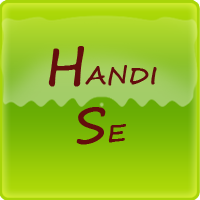
<style>
.page{position:relative;width:200px;height:200px}
.page>*{position:absolute;margin:0}
.t1{font:24px "SegoeScript";color:#640d0d;font-weight:bold}
.t2{font:48px "SegoeScript";color:#640d0d;font-weight:bold}
</style>
<div class="page">
<p class="t1" style="left:48px;top:46px;width:109px;height:99px;text-align:center"><span class="t2">H</span>ANDI<br><span class="t2">S</span>E</p>
</div>
